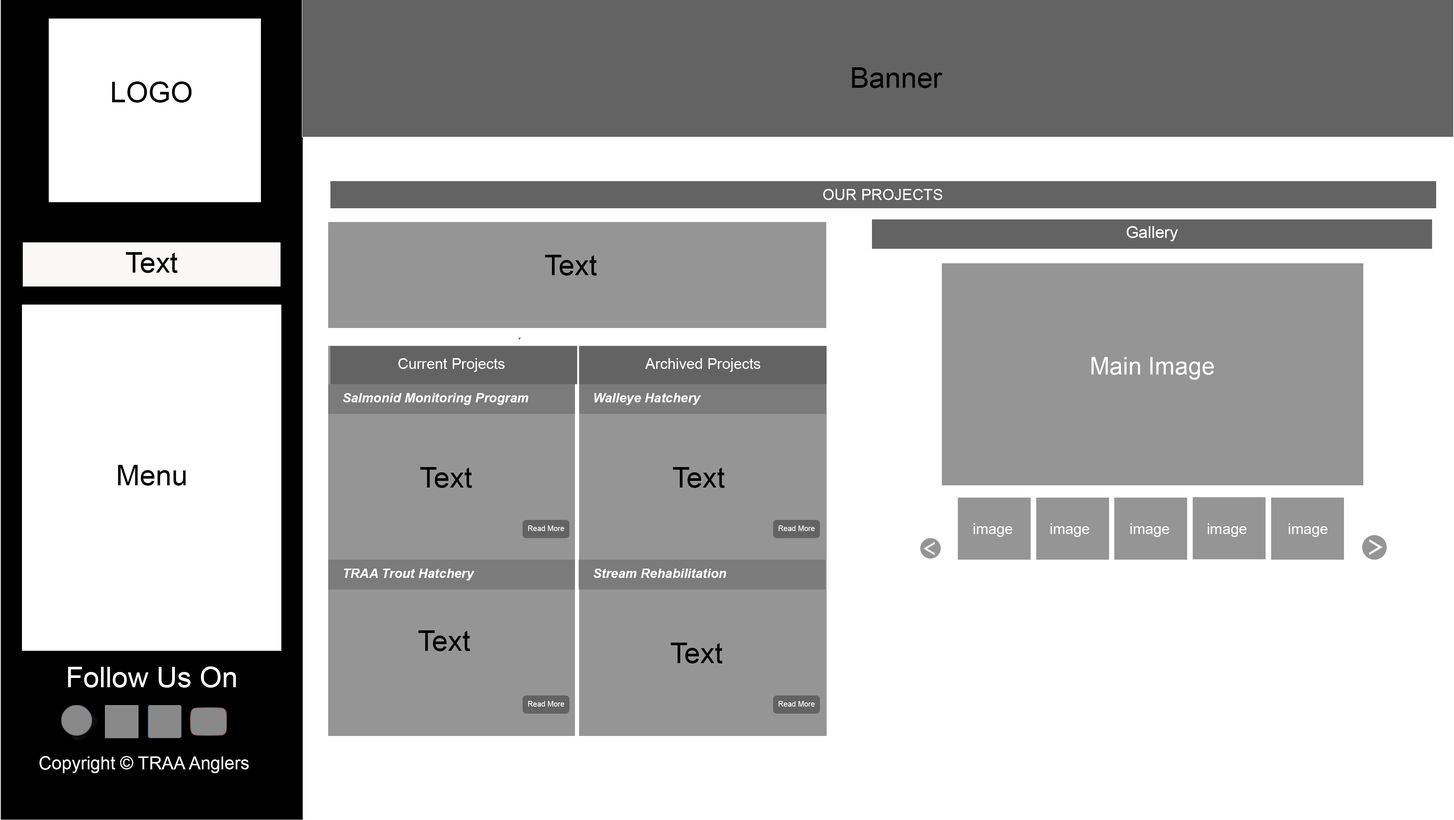
<style>
.page{position:relative;width:1454px;height:820px;background:#ffffff}
.page>*{position:absolute;margin:0}
.t1{font:28.7px "ArialMT";color:#000000}
.t2{font:15.4px "ArialMT";color:#ffffff}
.t3{font:16.6px "ArialMT";color:#ffffff}
.t4{font:4.5px "MyriadPro-Regular";color:#000000}
.t5{font:14.9px "ArialMT";color:#ffffff}
.t6{font:24px "ArialMT";color:#ffffff}
.t7{font:13px "Arial-BoldItalicMT";color:#ffffff}
.t8{font:7.4px "ArialMT";color:#ffffff}
.t9{font:14.8px "ArialMT";color:#ffffff}
.t10{font:28.7px "ArialMT";color:#ffffff}
.t11{font:17.9px "ArialMT";color:#ffffff}
</style>
<div class="page">
<p class="t1" style="left:852px;top:67px;width:91px;height:21px">Banner</p>
<p class="t1" style="left:112px;top:81px;width:80px;height:22px">LOGO</p>
<p class="t2" style="left:824px;top:189px;width:119px;height:11px">OUR PROJECTS</p>
<p class="t3" style="left:1127px;top:226px;width:52px;height:15px">Gallery</p>
<p class="t1" style="left:126px;top:252px;width:52px;height:21px">Text</p>
<p class="t1" style="left:545px;top:255px;width:52px;height:21px">Text</p>
<p class="t4" style="left:519px;top:337px;width:2px;height:2px">v</p>
<p class="t5" style="left:399px;top:358px;width:106px;height:14px">Current Projects</p>
<p class="t5" style="left:645px;top:358px;width:116px;height:14px">Archived Projects</p>
<p class="t6" style="left:1092px;top:357px;width:122px;height:23px">Main Image</p>
<p class="t7" style="left:343px;top:393px;width:186px;height:12px">Salmonid Monitoring Program</p>
<p class="t7" style="left:595px;top:393px;width:106px;height:12px">Walleye Hatchery</p>
<p class="t1" style="left:118px;top:465px;width:68px;height:21px">Menu</p>
<p class="t1" style="left:420px;top:467px;width:52px;height:21px">Text</p>
<p class="t1" style="left:673px;top:467px;width:52px;height:21px">Text</p>
<p class="t8" style="left:528px;top:525px;width:36px;height:6px">Read More</p>
<p class="t8" style="left:779px;top:525px;width:36px;height:6px">Read More</p>
<p class="t9" style="left:974px;top:523px;width:39px;height:14px">image</p>
<p class="t9" style="left:1051px;top:523px;width:39px;height:14px">image</p>
<p class="t9" style="left:1131px;top:523px;width:39px;height:14px">image</p>
<p class="t9" style="left:1208px;top:523px;width:39px;height:14px">image</p>
<p class="t9" style="left:1289px;top:523px;width:39px;height:14px">image</p>
<p class="t7" style="left:344px;top:568px;width:131px;height:12px">TRAA Trout Hatchery</p>
<p class="t7" style="left:594px;top:568px;width:133px;height:10px">Stream Rehabilitation</p>
<p class="t1" style="left:418px;top:630px;width:52px;height:21px">Text</p>
<p class="t1" style="left:671px;top:642px;width:52px;height:21px">Text</p>
<p class="t10" style="left:68px;top:666px;width:168px;height:21px">Follow Us On</p>
<p class="t8" style="left:528px;top:701px;width:36px;height:5px">Read More</p>
<p class="t8" style="left:779px;top:701px;width:36px;height:5px">Read More</p>
<p class="t11" style="left:39px;top:756px;width:210px;height:17px">Copyright © TRAA Anglers</p>
</div>
